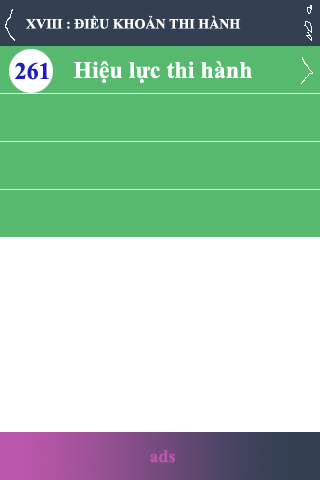
<style>
.page{position:relative;width:320px;height:480px;background:#ffffff}
.page>*{position:absolute;margin:0}
.t1{font:14px "TimesNewRomanPS-BoldMT";color:#ffffff}
.t2{font:24px "TimesNewRomanPS-BoldMT";color:#221ebd}
.t3{font:24px "TimesNewRomanPS-BoldMT";color:#ffffff}
</style>
<div class="page">
<p class="t1" style="left:26px;top:15px;width:215px;height:14px">XVIII : ĐIỀU KHOẢN THI HÀNH</p>
<p class="t2" style="left:15px;top:62px;width:34px;height:18px">261</p>
<p class="t3" style="left:73px;top:61px;width:179px;height:23px">Hiệu lực thi hành</p>
</div>
